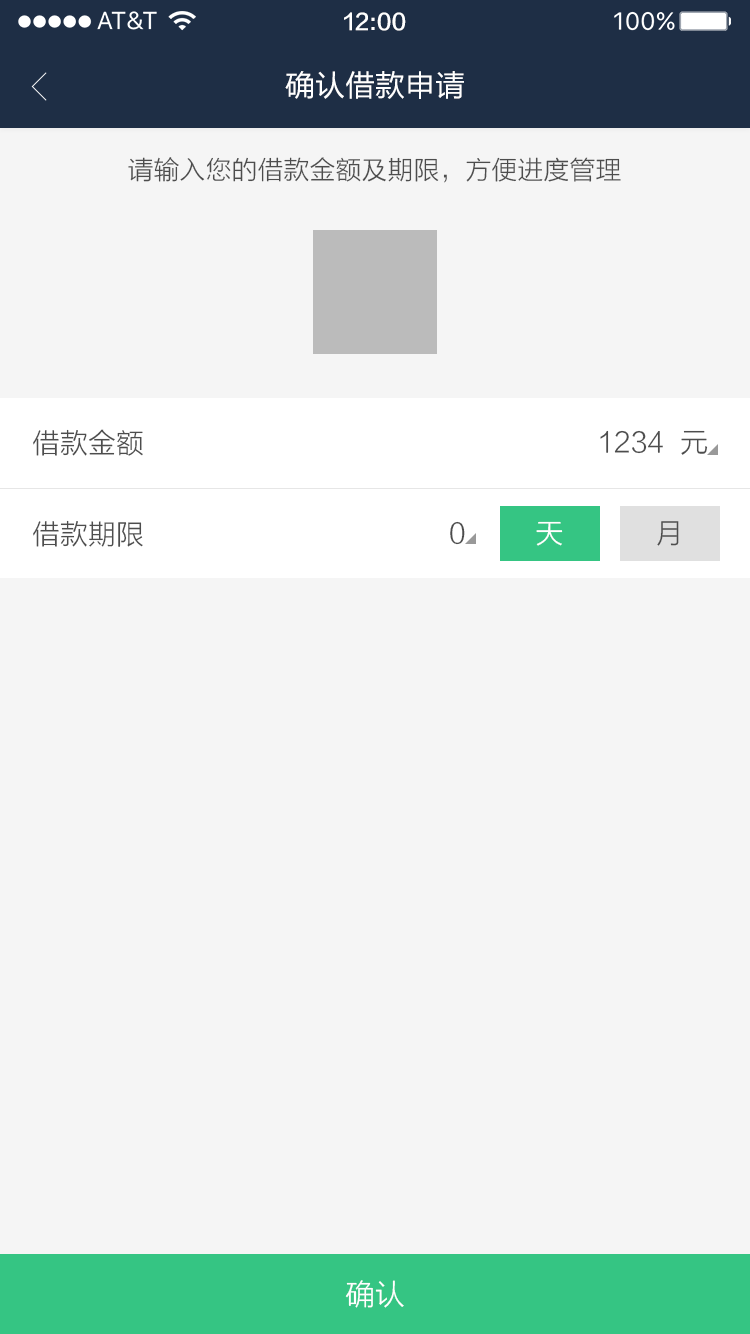
<style>
.page{position:relative;width:750px;height:1334px;background:#f5f5f5}
.page>*{position:absolute;margin:0}
.t1{font:22px "FZLTZHK--GBK1-0";color:#ffffff}
.t2{font:30px "FZLTHJW--GB1-0";color:#ffffff}
.t3{font:26px "FZLTXHK";color:#4d4d4d}
.t4{font:28px "FZLTXHK";color:#4d4d4d}
.t5{font:28px "FZLTXHK";color:#ffffff}
.t6{font:30px "FZLTXHK";color:#ffffff}
</style>
<div class="page">
<p class="t1" style="left:344px;top:12px;width:62px;height:19px">12:00</p>
<p class="t2" style="left:285px;top:71px;width:179px;height:28px">确认借款申请</p>
<p class="t3" style="left:128px;top:157px;width:493px;height:26px">请输入您的借款金额及期限，方便进度管理</p>
<p class="t4" style="left:33px;top:429px;width:110px;height:27px">借款金额</p>
<p class="t4" style="left:600px;top:430px;width:108px;height:25px">1234  元</p>
<p class="t4" style="left:33px;top:520px;width:110px;height:27px">借款期限</p>
<p class="t4" style="left:450px;top:521px;width:15px;height:24px">0</p>
<p class="t5" style="left:536px;top:521px;width:27px;height:25px">天</p>
<p class="t4" style="left:657px;top:521px;width:22px;height:25px">月</p>
<p class="t6" style="left:345px;top:1280px;width:59px;height:28px">确认</p>
</div>
